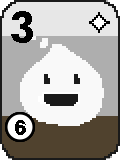
<style>
.page{position:relative;width:120px;height:160px;background:#aeaeae}
.page>*{position:absolute;margin:0}
.t1{font:36px "HeadlineR-HM";color:#000000}
.t2{font:18px "HeadlineR-HM";color:#000000}
</style>
<div class="page">
<p class="t1" style="left:11px;top:11px;width:22px;height:32px">3</p>
<p class="t2" style="left:15px;top:120px;width:11px;height:15px">6</p>
</div>
